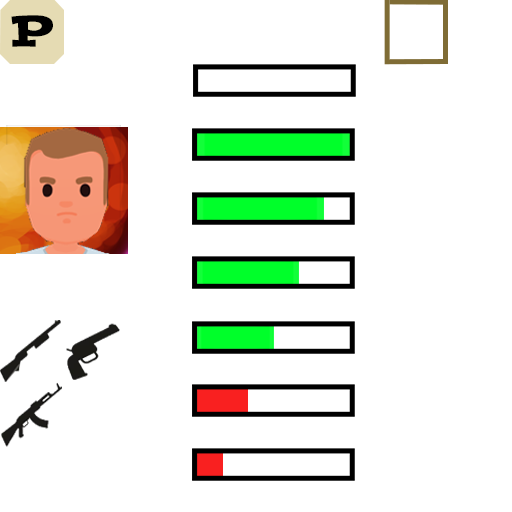
<style>
.page{position:relative;width:512px;height:512px;background:#ffffff}
.page>*{position:absolute;margin:0}
.t1{font:43.5px "PostinoStd";color:#000000;font-weight:bold}
</style>
<div class="page">
<p class="t1" style="left:11px;top:15px;width:42px;height:32px">P</p>
</div>
